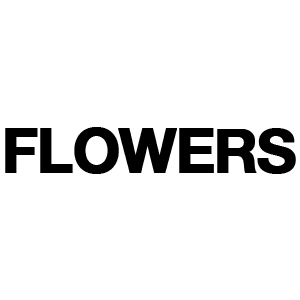
<style>
.page{position:relative;width:300px;height:300px;background:#ffffff}
.page>*{position:absolute;margin:0}
.t1{font:60.5px "HelveticaNeue-Bold";letter-spacing:-0.04em;color:#000000;font-weight:bold}
</style>
<div class="page">
<p class="t1" style="left:5px;top:127px;width:291px;height:47px">FLOWERS</p>
</div>
